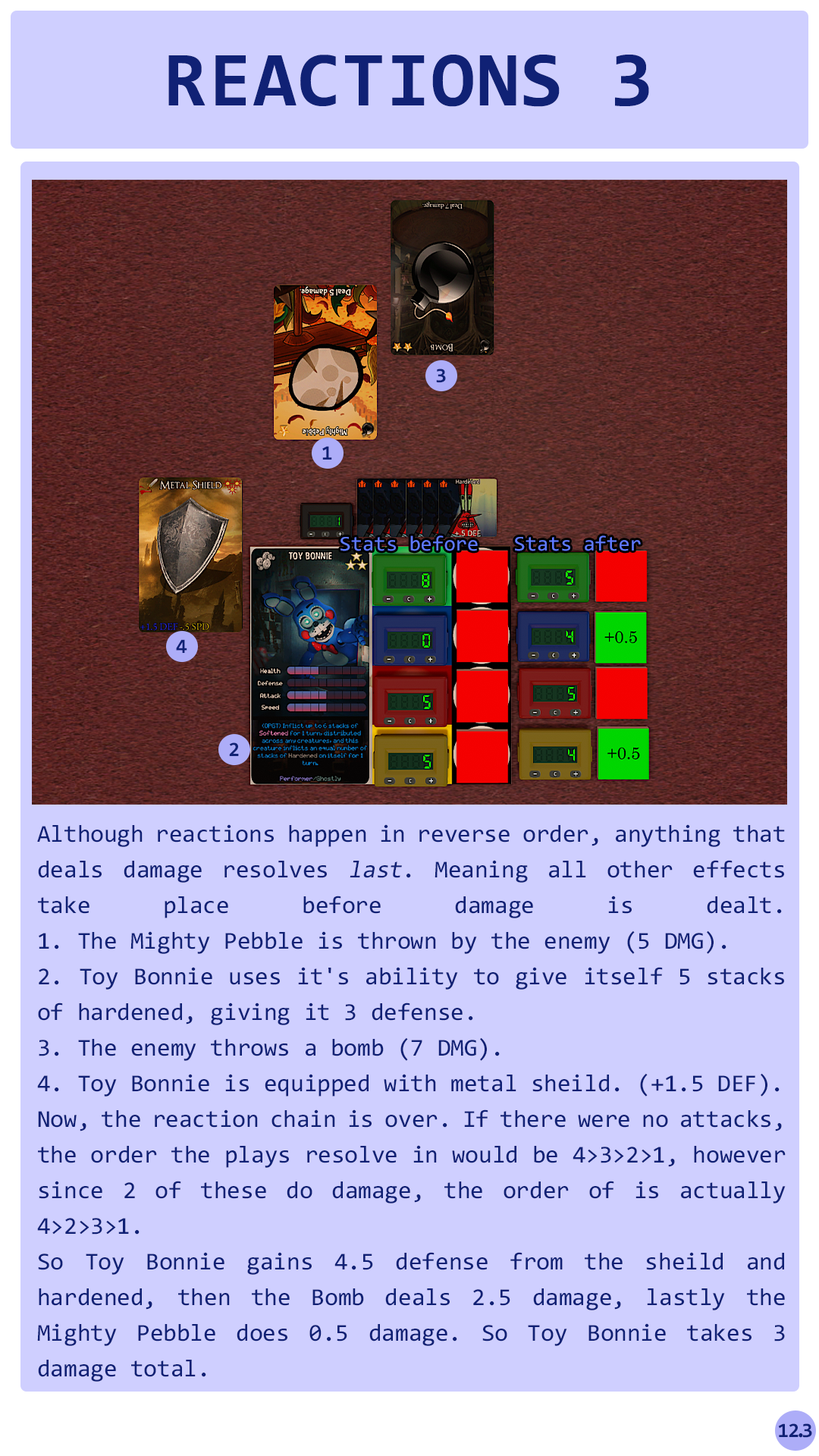
<style>
.page{position:relative;width:819px;height:1456px;background:#cfcfff}
.page>*{position:absolute;margin:0}
.t1{font:78.3px "Consolas-Bold";letter-spacing:0.02em;color:#102175}
.t2{font:20.5px "Consolas-Bold";color:#102175}
.t3{font:21.1px "Consolas";color:#5f79ff}
.t4{font:24.3px/35.6px "Consolas";color:#102175}
.t5{font:24.3px/35.6px "Consolas";color:#102175;font-style:italic}
.t6{font:20.5px "Consolas-Bold";letter-spacing:-0.06em;color:#102175}
.t7{font:20.5px "Consolas-Bold";letter-spacing:-0.2em;color:#102175}
.t8{font:20.5px "Consolas-Bold";letter-spacing:-0.22em;color:#102175}
</style>
<div class="page">
<p class="t1" style="left:168px;top:55px;width:481px;height:52px">REACTIONS 3</p>
<p class="t2" style="left:436px;top:369px;width:10px;height:14px">3</p>
<p class="t2" style="left:322px;top:446px;width:10px;height:14px">1</p>
<p class="t3" style="left:340px;top:535px;width:138px;height:16px">Stats before</p>
<p class="t3" style="left:515px;top:535px;width:126px;height:16px">Stats after</p>
<p class="t2" style="left:176px;top:639px;width:11px;height:14px">4</p>
<p class="t2" style="left:229px;top:742px;width:10px;height:14px">2</p>
<p class="t4" style="left:37px;top:824px;width:749px;height:558px;text-align:justify">Although reactions happen in reverse order, anything that deals damage resolves <span class="t5">last</span>. Meaning all other effects take place before damage is dealt. <br>1. The Mighty Pebble is thrown by the enemy (5 DMG).<br>2. Toy Bonnie uses it's ability to give itself 5 stacks of hardened, giving it 3 defense. <br>3. The enemy throws a bomb (7 DMG).<br>4. Toy Bonnie is equipped with metal sheild. (+1.5 DEF).<br>Now, the reaction chain is over. If there were no attacks, the order the plays resolve in would be 4&gt;3&gt;2&gt;1, however since 2 of these do damage, the order of is actually 4&gt;2&gt;3&gt;1.<br>So Toy Bonnie gains 4.5 defense from the sheild and hardened, then the Bomb deals 2.5 damage, lastly the Mighty Pebble does 0.5 damage. So Toy Bonnie takes 3 damage total.</p>
<p class="t6" style="left:778px;top:1423px;width:34px;height:15px">1<span class="t7">2</span><span class="t8">.</span>3</p>
</div>
